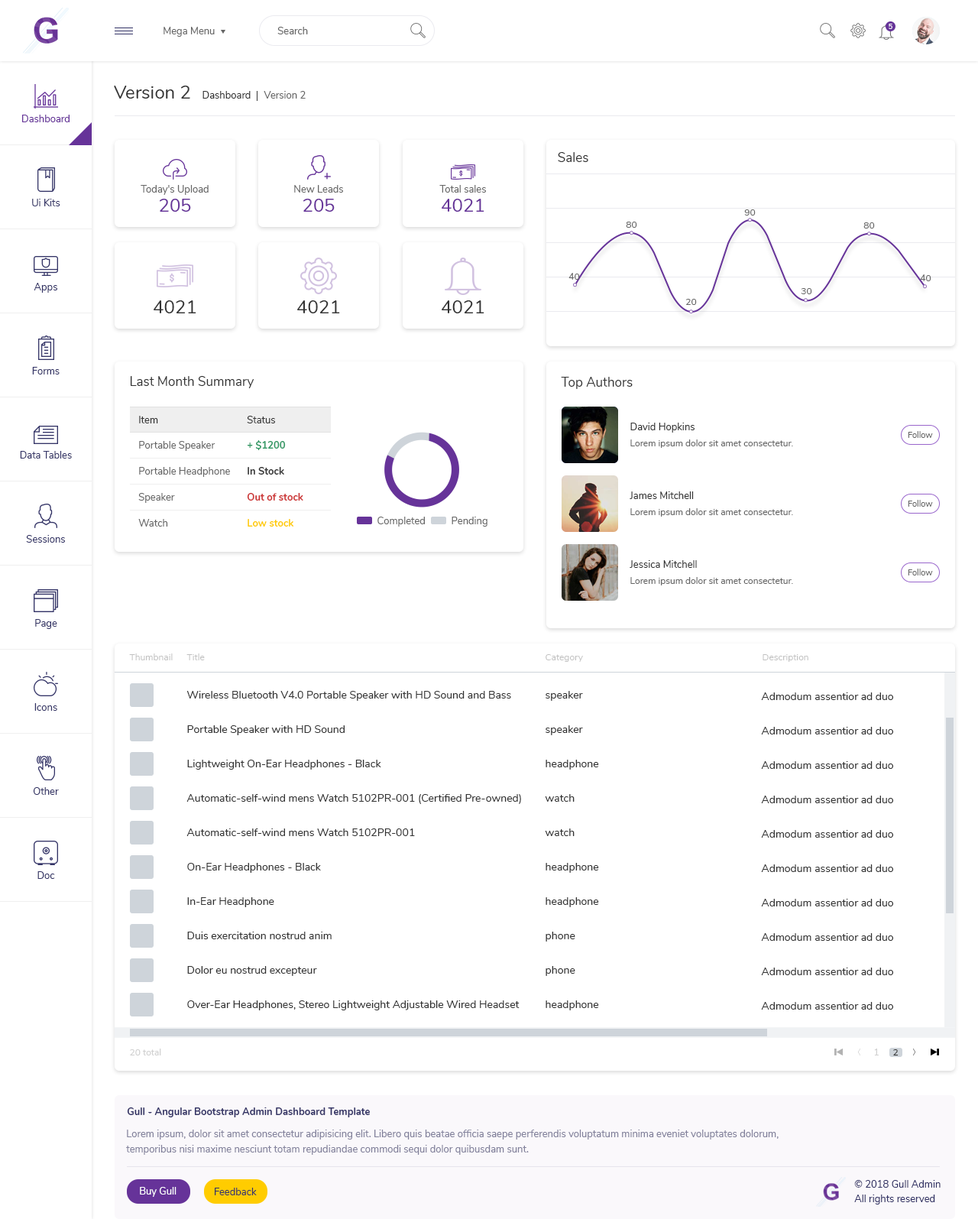
<style>
.page{position:relative;width:978px;height:1219px;background:#ffffff}
.page>*{position:absolute;margin:0}
.t1{font:9.9px "Nunito-Regular";color:#666666}
.t2{font:6.9px "Nunito-SemiBold";color:#ffffff}
.t3{font:18.3px "Nunito-Regular";color:#333333}
.t4{font:9.9px "Nunito-Regular";color:#333333}
.t5{font:9.9px "Nunito-Regular";color:#663399}
.t6{font:13px "Nunito-Regular";color:#333333}
.t7{font:9.9px "Nunito-Regular";color:#333366}
.t8{font:18.3px "Nunito-Regular";color:#663399}
.t9{font:9.2px "Nunito-Regular";color:#666666}
.t10{font:8.4px "Nunito-Regular";color:#666666}
.t11{font:9.9px "Nunito-Bold";color:#339966}
.t12{font:9.9px "Nunito-Bold";color:#333333}
.t13{font:9.9px "Nunito-Bold";color:#cc3333}
.t14{font:9.9px "Nunito-Bold";color:#ffcc00}
.t15{font:9.2px "Nunito-Regular";color:#c1c1c1}
.t16{font:10.7px "Nunito-Regular";color:#333333}
.t17{font:9.2px "Nunito-Regular";color:#d0d0d0}
.t18{font:9.2px "Nunito-Regular";color:#333333}
.t19{font:9.9px "Nunito-Bold";color:#333366}
.t20{font:9.9px/15.3px "Nunito-Regular";color:#82819b}
.t21{font:9.9px "Nunito-Regular";color:#ffffff}
</style>
<div class="page">
<p class="t1" style="left:164px;top:27px;width:51px;height:10px">Mega Menu</p>
<p class="t1" style="left:277px;top:27px;width:31px;height:7px">Search</p>
<p class="t2" style="left:889px;top:24px;width:4px;height:5px">5</p>
<p class="t3" style="left:114px;top:86px;width:76px;height:13px">Version 2</p>
<p class="t4" style="left:203px;top:91px;width:48px;height:8px">Dashboard</p>
<p class="t1" style="left:264px;top:91px;width:42px;height:8px">Version 2</p>
<p class="t5" style="left:22px;top:115px;width:48px;height:7px">Dashboard</p>
<p class="t6" style="left:558px;top:152px;width:30px;height:10px">Sales</p>
<p class="t1" style="left:141px;top:185px;width:68px;height:10px">Today's Upload</p>
<p class="t1" style="left:294px;top:185px;width:49px;height:8px">New Leads</p>
<p class="t1" style="left:439px;top:185px;width:47px;height:8px">Total sales</p>
<p class="t7" style="left:32px;top:199px;width:28px;height:7px">Ui Kits</p>
<p class="t8" style="left:160px;top:199px;width:31px;height:13px">205</p>
<p class="t8" style="left:303px;top:199px;width:32px;height:13px">205</p>
<p class="t8" style="left:442px;top:199px;width:43px;height:13px">4021</p>
<p class="t9" style="left:744px;top:209px;width:12px;height:7px">90</p>
<p class="t9" style="left:626px;top:222px;width:11px;height:6px">80</p>
<p class="t9" style="left:864px;top:222px;width:11px;height:7px">80</p>
<p class="t9" style="left:569px;top:273px;width:11px;height:7px">40</p>
<p class="t9" style="left:920px;top:274px;width:12px;height:7px">40</p>
<p class="t7" style="left:34px;top:283px;width:23px;height:10px">Apps</p>
<p class="t9" style="left:801px;top:288px;width:11px;height:6px">30</p>
<p class="t3" style="left:154px;top:300px;width:42px;height:13px">4021</p>
<p class="t3" style="left:297px;top:300px;width:43px;height:13px">4021</p>
<p class="t3" style="left:442px;top:300px;width:43px;height:13px">4021</p>
<p class="t9" style="left:686px;top:299px;width:11px;height:6px">20</p>
<p class="t7" style="left:32px;top:367px;width:28px;height:7px">Forms</p>
<p class="t6" style="left:130px;top:376px;width:124px;height:12px">Last Month Summary</p>
<p class="t6" style="left:561px;top:377px;width:72px;height:12px">Top Authors</p>
<p class="t4" style="left:139px;top:416px;width:19px;height:7px">Item</p>
<p class="t4" style="left:247px;top:416px;width:28px;height:7px">Status</p>
<p class="t4" style="left:631px;top:423px;width:64px;height:10px">David Hopkins</p>
<p class="t10" style="left:908px;top:431px;width:25px;height:7px">Follow</p>
<p class="t1" style="left:139px;top:441px;width:77px;height:10px">Portable Speaker</p>
<p class="t11" style="left:247px;top:440px;width:39px;height:10px">+ $1200</p>
<p class="t9" style="left:631px;top:439px;width:162px;height:9px">Lorem ipsum dolor sit amet consectetur.</p>
<p class="t7" style="left:20px;top:451px;width:52px;height:8px">Data Tables</p>
<p class="t1" style="left:139px;top:467px;width:91px;height:10px">Portable Headphone</p>
<p class="t12" style="left:248px;top:467px;width:36px;height:8px">In Stock</p>
<p class="t1" style="left:138px;top:493px;width:37px;height:10px">Speaker</p>
<p class="t13" style="left:247px;top:493px;width:56px;height:8px">Out of stock</p>
<p class="t4" style="left:630px;top:491px;width:64px;height:8px">James Mitchell</p>
<p class="t9" style="left:631px;top:508px;width:162px;height:9px">Lorem ipsum dolor sit amet consectetur.</p>
<p class="t10" style="left:908px;top:500px;width:25px;height:7px">Follow</p>
<p class="t1" style="left:138px;top:519px;width:30px;height:8px">Watch</p>
<p class="t14" style="left:248px;top:519px;width:45px;height:8px">Low stock</p>
<p class="t1" style="left:378px;top:517px;width:47px;height:10px">Completed</p>
<p class="t1" style="left:452px;top:517px;width:36px;height:10px">Pending</p>
<p class="t7" style="left:26px;top:535px;width:39px;height:8px">Sessions</p>
<p class="t4" style="left:630px;top:560px;width:67px;height:8px">Jessica Mitchell</p>
<p class="t10" style="left:908px;top:569px;width:25px;height:6px">Follow</p>
<p class="t9" style="left:631px;top:577px;width:162px;height:8px">Lorem ipsum dolor sit amet consectetur.</p>
<p class="t7" style="left:35px;top:619px;width:22px;height:10px">Page</p>
<p class="t15" style="left:129px;top:653px;width:44px;height:7px">Thumbnail</p>
<p class="t15" style="left:186px;top:653px;width:19px;height:7px">Title</p>
<p class="t15" style="left:546px;top:654px;width:37px;height:8px">Category</p>
<p class="t15" style="left:763px;top:654px;width:46px;height:8px">Description</p>
<p class="t16" style="left:186px;top:691px;width:325px;height:10px">Wireless Bluetooth V4.0 Portable Speaker with HD Sound and Bass</p>
<p class="t16" style="left:546px;top:691px;width:37px;height:10px">speaker</p>
<p class="t16" style="left:761px;top:692px;width:132px;height:8px">Admodum assentior ad duo</p>
<p class="t7" style="left:34px;top:703px;width:23px;height:8px">Icons</p>
<p class="t16" style="left:187px;top:725px;width:158px;height:10px">Portable Speaker with HD Sound</p>
<p class="t16" style="left:546px;top:725px;width:37px;height:10px">speaker</p>
<p class="t16" style="left:761px;top:727px;width:132px;height:7px">Admodum assentior ad duo</p>
<p class="t16" style="left:187px;top:760px;width:194px;height:10px">Lightweight On-Ear Headphones - Black</p>
<p class="t16" style="left:546px;top:760px;width:53px;height:10px">headphone</p>
<p class="t16" style="left:761px;top:761px;width:132px;height:8px">Admodum assentior ad duo</p>
<p class="t7" style="left:33px;top:787px;width:26px;height:8px">Other</p>
<p class="t16" style="left:186px;top:794px;width:335px;height:10px">Automatic-self-wind mens Watch 5102PR-001 (Certified Pre-owned)</p>
<p class="t16" style="left:545px;top:794px;width:30px;height:8px">watch</p>
<p class="t16" style="left:761px;top:796px;width:132px;height:7px">Admodum assentior ad duo</p>
<p class="t16" style="left:186px;top:828px;width:229px;height:8px">Automatic-self-wind mens Watch 5102PR-001</p>
<p class="t16" style="left:545px;top:828px;width:30px;height:8px">watch</p>
<p class="t16" style="left:761px;top:830px;width:132px;height:8px">Admodum assentior ad duo</p>
<p class="t16" style="left:187px;top:863px;width:134px;height:10px">On-Ear Headphones - Black</p>
<p class="t16" style="left:546px;top:863px;width:53px;height:10px">headphone</p>
<p class="t16" style="left:761px;top:864px;width:132px;height:8px">Admodum assentior ad duo</p>
<p class="t7" style="left:37px;top:871px;width:18px;height:8px">Doc</p>
<p class="t16" style="left:187px;top:897px;width:87px;height:10px">In-Ear Headphone</p>
<p class="t16" style="left:546px;top:897px;width:53px;height:10px">headphone</p>
<p class="t16" style="left:761px;top:899px;width:132px;height:7px">Admodum assentior ad duo</p>
<p class="t16" style="left:187px;top:932px;width:145px;height:7px">Duis exercitation nostrud anim</p>
<p class="t16" style="left:546px;top:932px;width:29px;height:10px">phone</p>
<p class="t16" style="left:761px;top:933px;width:132px;height:8px">Admodum assentior ad duo</p>
<p class="t16" style="left:187px;top:966px;width:130px;height:10px">Dolor eu nostrud excepteur</p>
<p class="t16" style="left:546px;top:966px;width:29px;height:10px">phone</p>
<p class="t16" style="left:761px;top:968px;width:132px;height:7px">Admodum assentior ad duo</p>
<p class="t16" style="left:187px;top:1000px;width:333px;height:10px">Over-Ear Headphones, Stereo Lightweight Adjustable Wired Headset</p>
<p class="t16" style="left:546px;top:1000px;width:53px;height:10px">headphone</p>
<p class="t16" style="left:761px;top:1002px;width:132px;height:8px">Admodum assentior ad duo</p>
<p class="t17" style="left:130px;top:1049px;width:31px;height:6px">20 total</p>
<p class="t17" style="left:874px;top:1049px;width:5px;height:6px">1</p>
<p class="t18" style="left:893px;top:1049px;width:6px;height:6px">2</p>
<p class="t19" style="left:127px;top:1107px;width:243px;height:10px">Gull - Angular Bootstrap Admin Dashboard Template</p>
<p class="t20" style="left:126px;top:1130px;width:653px;height:25px">Lorem ipsum, dolor sit amet consectetur adipisicing elit. Libero quis beatae officia saepe perferendis voluptatum minima eveniet voluptates dolorum, <br>temporibus nisi maxime nesciunt totam repudiandae commodi sequi dolor quibusdam sunt.</p>
<p class="t7" style="left:854px;top:1180px;width:87px;height:8px">© 2018 Gull Admin</p>
<p class="t21" style="left:140px;top:1187px;width:37px;height:10px">Buy Gull</p>
<p class="t7" style="left:215px;top:1188px;width:42px;height:7px">Feedback</p>
<p class="t7" style="left:854px;top:1195px;width:81px;height:9px">All rights reserved</p>
</div>
